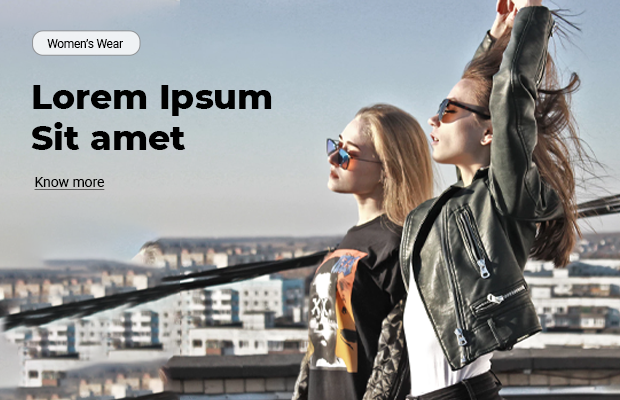
<style>
.page{position:relative;width:620px;height:400px}
.page>*{position:absolute;margin:0}
.t1{font:11.5px "Roboto-Regular";color:#000000}
.t2{font:34.6px "Montserrat-ExtraBold";color:#000000}
.t3{font:13.8px "Roboto-Regular";color:#000000;text-decoration:underline}
</style>
<div class="page">
<p class="t1" style="left:47px;top:39px;width:76px;height:9px">Women’s Wear</p>
<p class="t2" style="left:31px;top:85px;width:241px;height:65px">Lorem Ipsum<br>Sit amet</p>
<p class="t3" style="left:34px;top:177px;width:71px;height:13px">Know more</p>
</div>
